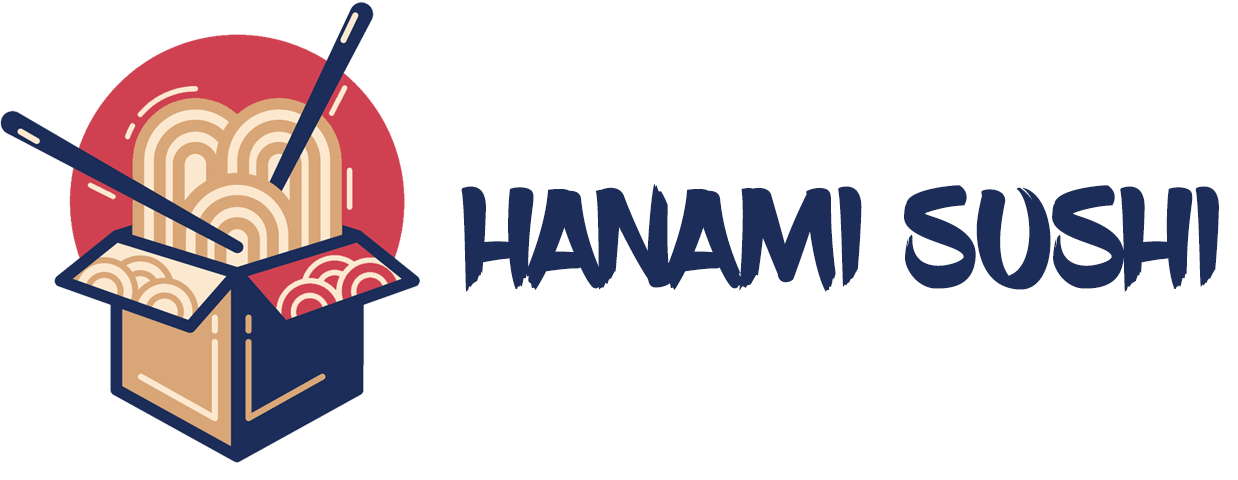
<style>
.page{position:relative;width:1238px;height:480px;background:#ffffff}
.page>*{position:absolute;margin:0}
.t1{font:142px "BlowBrush";color:#1c2d59}
</style>
<div class="page">
<p class="t1" style="left:461px;top:183px;width:758px;height:109px">HANAMI SUSHI</p>
</div>
